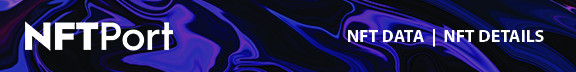
<style>
.page{position:relative;width:576px;height:72px}
.page>*{position:absolute;margin:0}
.t1{font:17.8px "MyriadPro-Bold";color:#ffffff}
</style>
<div class="page">
<p class="t1" style="left:348px;top:29px;width:196px;height:18px">NFT DATA  |  NFT DETAILS</p>
</div>
